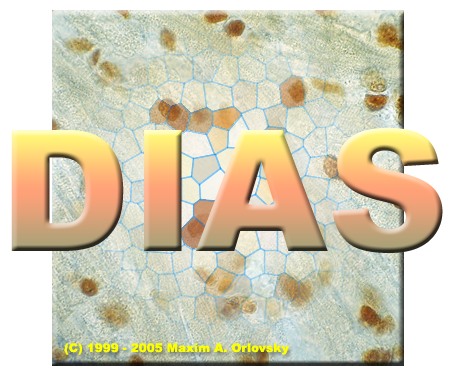
<style>
.page{position:relative;width:455px;height:379px;background:#ffffff}
.page>*{position:absolute;margin:0}
.t1{font:168.7px "Arial-Black"}
.t2{font:12px "Arial-Black";color:#fcff00}
</style>
<div class="page">
<p class="t1" style="left:11px;top:127px;width:432px;height:126px">DIAS</p>
<p class="t2" style="left:64px;top:343px;width:225px;height:12px">(C) 1999 - 2005 Maxim A. Orlovsky</p>
</div>
